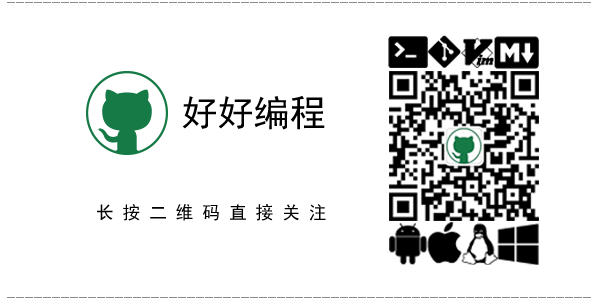
<style>
.page{position:relative;width:600px;height:300px;background:#ffffff}
.page>*{position:absolute;margin:0}
.t1{font:18px "SimHei";color:#8b8b8b}
.t2{font:36px "SimHei";color:#000000}
.t3{font:18px "SimHei";color:#000000}
</style>
<div class="page">
<p class="t1" style="left:7px;top:2px;width:584px;height:1px">-------------------------------------------------------------------------</p>
<p class="t2" style="left:182px;top:96px;width:143px;height:34px">好好编程</p>
<p class="t3" style="left:97px;top:204px;width:229px;height:17px">长 按 二 维 码 直 接 关 注</p>
<p class="t1" style="left:7px;top:297px;width:584px;height:1px">-------------------------------------------------------------------------</p>
</div>
